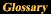
<style>
.page{position:relative;width:51px;height:14px;background:#000000}
.page>*{position:absolute;margin:0}
.t1{font:12px "TimesNewRomanPS-BoldMT";color:#fec45f;font-style:italic}
</style>
<div class="page">
<p class="t1" style="left:3px;top:2px;width:45px;height:12px">Glossary</p>
</div>
